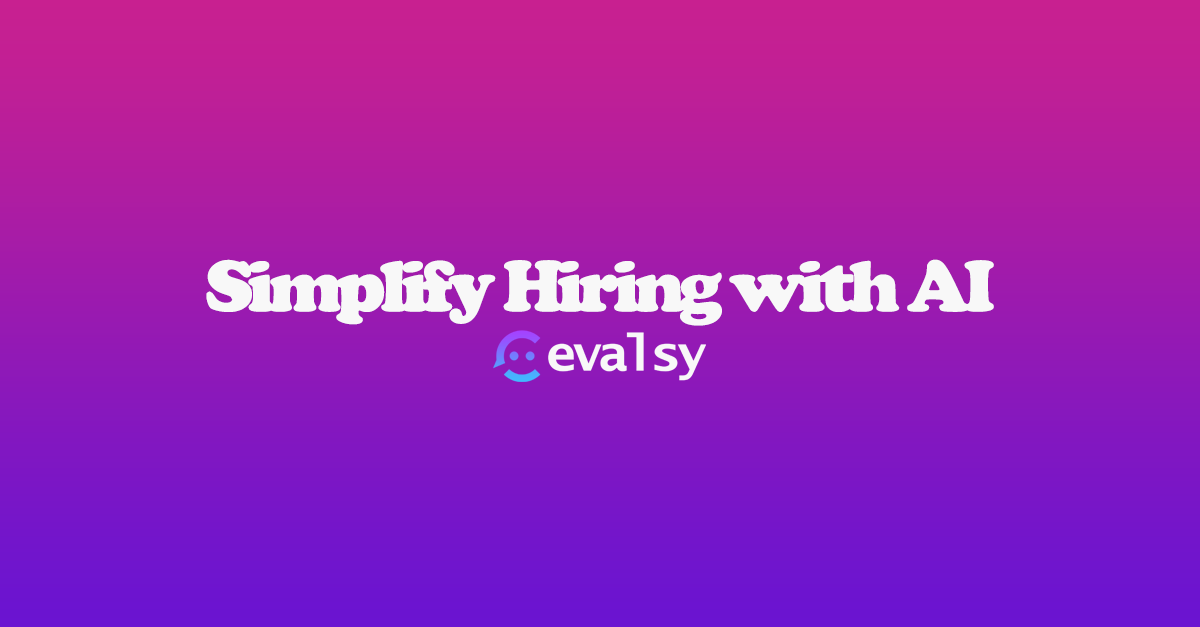
<style>
.page{position:relative;width:1200px;height:627px}
.page>*{position:absolute;margin:0}
.t1{font:75px "CooperBlack";letter-spacing:-0.075em;color:#f8f8f8}
</style>
<div class="page">
<p class="t1" style="left:206px;top:259px;width:788px;height:67px">Simplify Hiring with AI</p>
</div>
